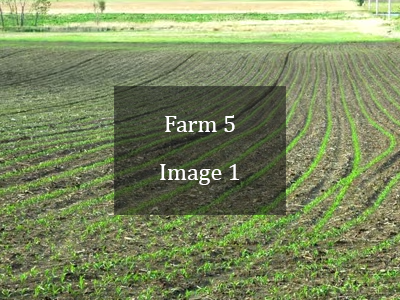
<style>
.page{position:relative;width:400px;height:300px}
.page>*{position:absolute;margin:0}
.t1{font:24px/24px "Cambria";color:#ffffff}
</style>
<div class="page">
<p class="t1" style="left:160px;top:115px;width:80px;height:70px;text-align:center">Farm 5<br> <br>Image 1</p>
</div>
